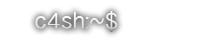
<style>
.page{position:relative;width:200px;height:40px;background:#ffffff}
.page>*{position:absolute;margin:0}
.t1{font:24px "DevanagariSangamMN";color:#ededed}
</style>
<div class="page">
<p class="t1" style="left:35px;top:11px;width:83px;height:21px">c4sh:~$</p>
</div>
